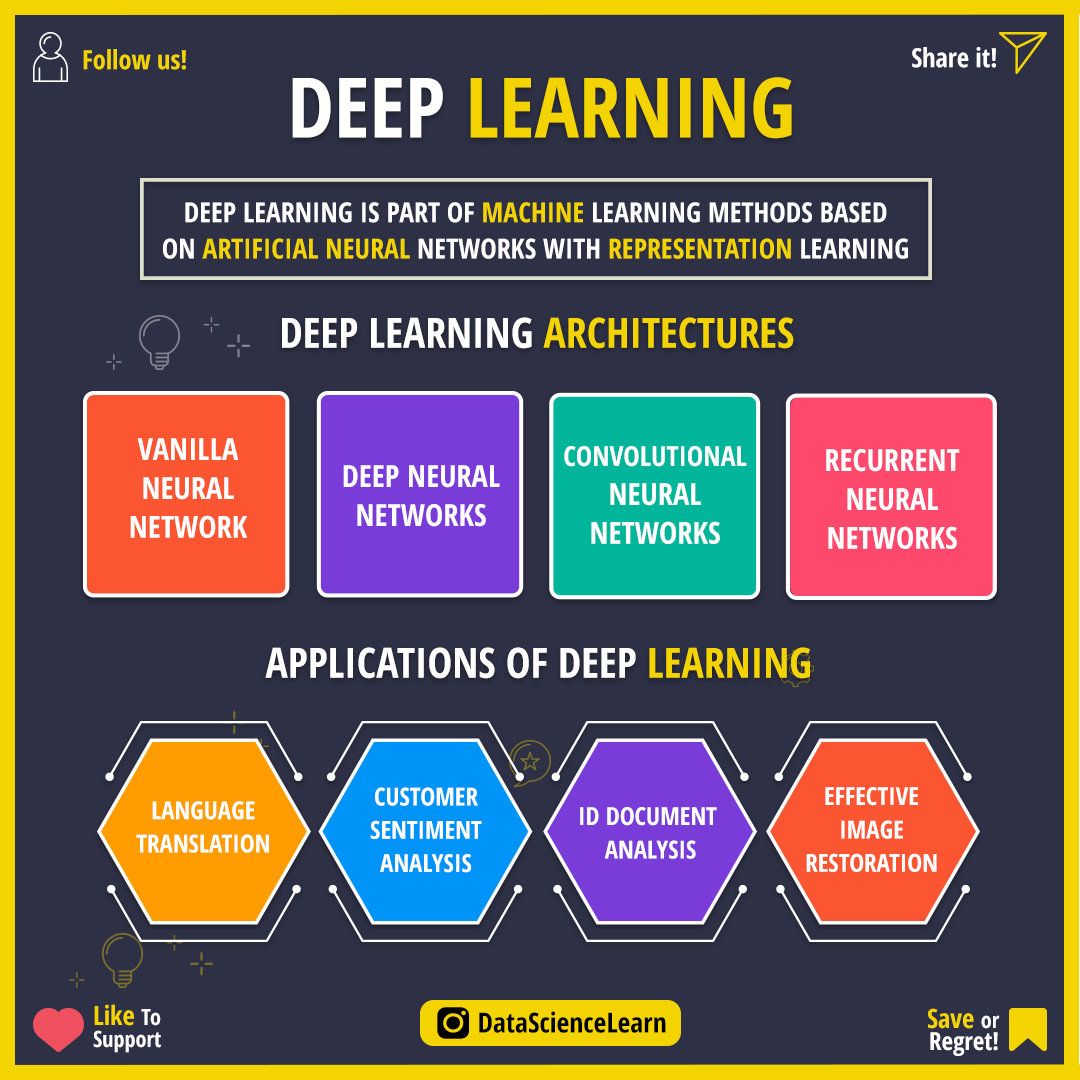
<style>
.page{position:relative;width:1080px;height:1080px;background:#2e3045}
.page>*{position:absolute;margin:0}
.t1{font:26.4px "OpenSans-CondensedBold";color:#f3d400}
.t2{font:26.4px "OpenSans-CondensedBold";color:#ffffff}
.t3{font:83.3px "OpenSans-CondensedBold";color:#f3d400}
.t4{font:83.3px "OpenSans-CondensedBold";color:#fffffe}
.t5{font:27.8px/36.1px "OpenSans-CondensedBold";color:#ffffff}
.t6{font:27.8px/36.1px "OpenSans-CondensedBold";color:#f3d400}
.t7{font:41.7px "OpenSans-CondensedBold";color:#ffffff}
.t8{font:41.7px "OpenSans-CondensedBold";color:#f3d400}
.t9{font:30.6px/38.9px "OpenSans-CondensedBold";color:#ffffff}
.t10{font:27.8px/38.9px "OpenSans-CondensedBold";color:#ffffff}
.t11{font:25px/33.3px "OpenSans-CondensedBold";color:#ffffff}
.t12{font:22.2px/22.2px "OpenSans-CondensedBold";color:#ffffff}
.t13{font:26.4px/22.2px "OpenSans-CondensedBold";color:#f3d400}
.t14{font:27.8px "OpenSans-CondensedBold";color:#000000}
.t15{font:25px/22.2px "OpenSans-CondensedBold";color:#ffffff}
</style>
<div class="page">
<p class="t1" style="left:83px;top:49px;width:103px;height:21px">Follow us!</p>
<p class="t2" style="left:912px;top:47px;width:84px;height:21px">Share it!</p>
<p class="t3" style="left:292px;top:77px;width:500px;height:62px"><span class="t4">DEEP </span>LEARNING</p>
<p class="t5" style="left:163px;top:202px;width:745px;height:57px;text-align:center">DEEP LEARNING IS PART OF <span class="t6">MACHINE </span>LEARNING METHODS BASED<br>ON <span class="t6">ARTIFICIAL NEURAL </span>NETWORKS WITH <span class="t6">REPRESENTATION </span>LEARNING</p>
<p class="t7" style="left:282px;top:317px;width:512px;height:32px">DEEP LEARNING <span class="t8">ARCHITECTURES</span></p>
<p class="t9" style="left:130px;top:438px;width:118px;height:100px;text-align:center">VANILLA<br>NEURAL<br>NETWORK</p>
<p class="t9" style="left:564px;top:446px;width:183px;height:98px;text-align:center"><span class="t10">CONVOLUTIONAL<br></span>NEURAL<br>NETWORKS</p>
<p class="t9" style="left:826px;top:449px;width:134px;height:100px;text-align:center">RECURRENT<br>NEURAL<br>NETWORKS</p>
<p class="t9" style="left:343px;top:465px;width:157px;height:62px;text-align:center">DEEP NEURAL<br>NETWORKS</p>
<p class="t7" style="left:265px;top:647px;width:545px;height:32px">APPLICATIONS OF DEEP <span class="t8">LEARNING</span></p>
<p class="t11" style="left:370px;top:787px;width:112px;height:86px;text-align:center">CUSTOMER<br>SENTIMENT<br>ANALYSIS</p>
<p class="t11" style="left:806px;top:787px;width:131px;height:85px;text-align:center">EFFECTIVE<br>IMAGE<br>RESTORATION</p>
<p class="t11" style="left:136px;top:801px;width:133px;height:52px;text-align:center">LANGUAGE<br>TRANSLATION</p>
<p class="t11" style="left:580px;top:807px;width:137px;height:52px;text-align:center">ID DOCUMENT <br>ANALYSIS</p>
<p class="t12" style="left:93px;top:1004px;width:68px;height:49px"><span class="t13">Like </span>To<br>Support</p>
<p class="t14" style="left:479px;top:1011px;width:187px;height:22px">DataScienceLearn</p>
<p class="t15" style="left:928px;top:1008px;width:72px;height:48px;text-align:right"><span class="t13">Save </span><span class="t12">or<br></span>Regret!</p>
</div>
